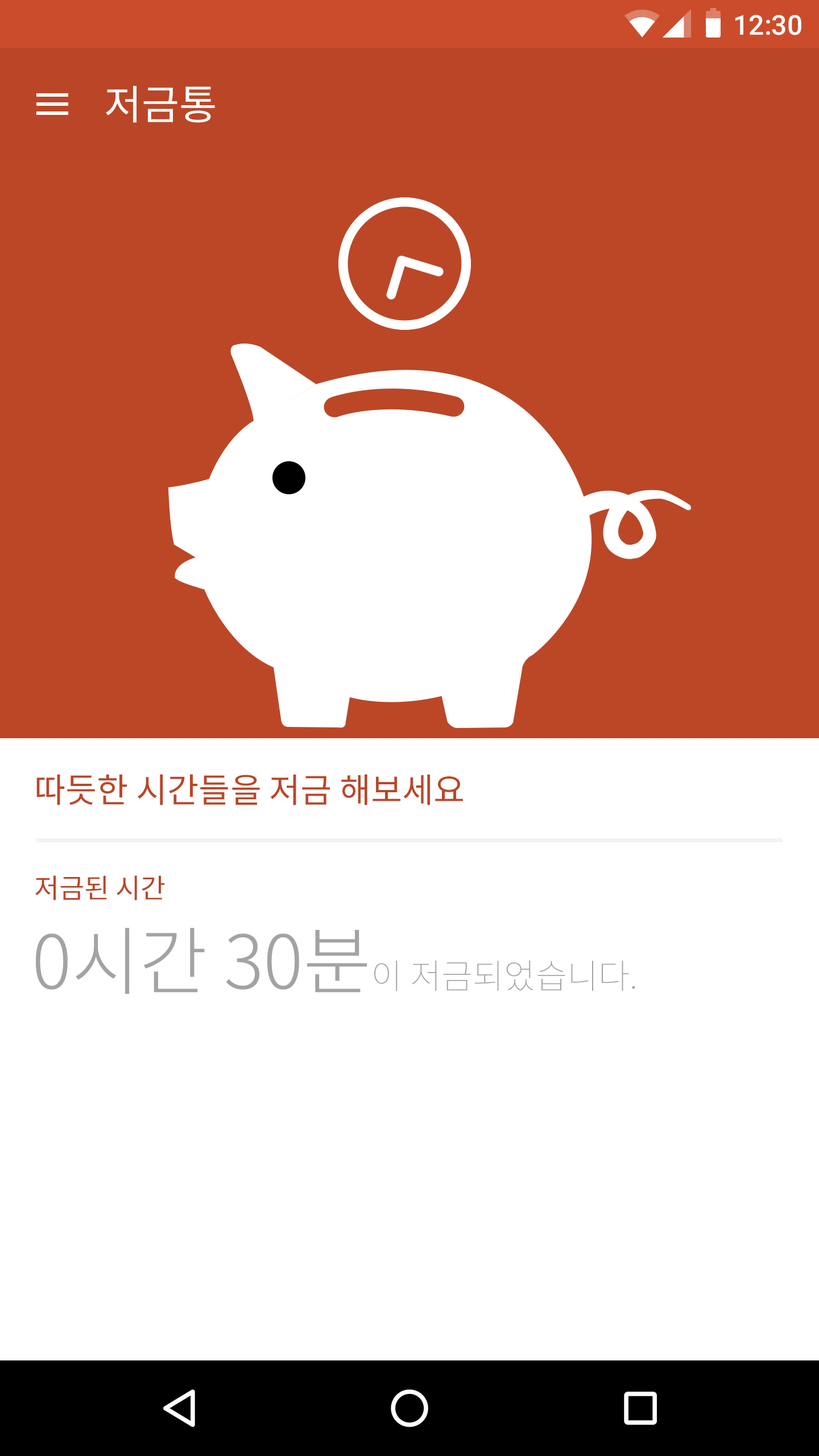
<style>
.page{position:relative;width:819px;height:1456px;background:#ffffff}
.page>*{position:absolute;margin:0}
.t1{font:27.3px "Roboto-Medium";color:#ffffff}
.t2{font:40.9px "NotoSansCJKkr-Regular";color:#ffffff}
.t3{font:34.1px "NotoSansCJKkr-Regular";color:#bb4627}
.t4{font:27.3px "NotoSansCJKkr-Regular";color:#bb4627}
.t5{font:34.1px "NotoSansCJKkr-Thin";color:#a3a3a3}
.t6{font:73.9px "NotoSansCJKkr-Light";color:#a3a3a3}
</style>
<div class="page">
<p class="t1" style="left:735px;top:15px;width:66px;height:20px">12:30</p>
<p class="t2" style="left:106px;top:86px;width:109px;height:37px">저금통</p>
<p class="t3" style="left:36px;top:774px;width:427px;height:31px">따듯한 시간들을 저금 해보세요</p>
<p class="t4" style="left:35px;top:875px;width:130px;height:25px">저금된 시간</p>
<p class="t5" style="left:36px;top:928px;width:599px;height:66px"><span class="t6">0시간 30분</span>이 저금되었습니다.</p>
</div>
